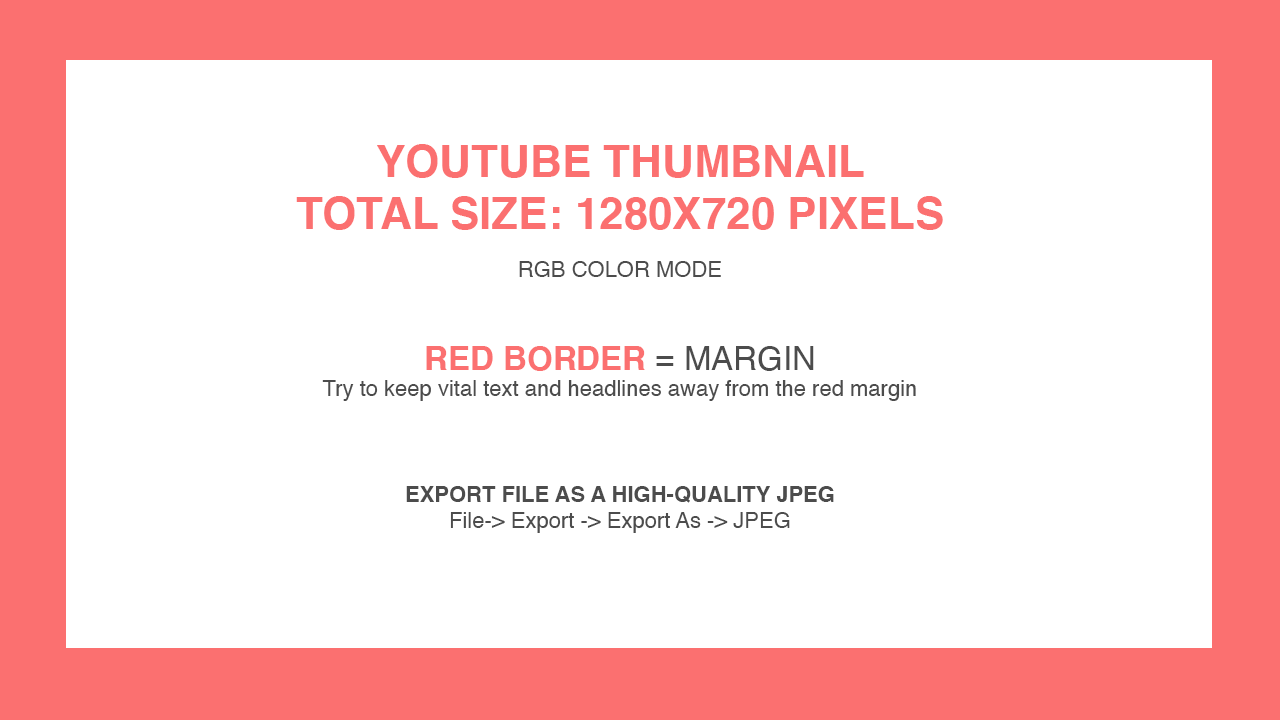
<style>
.page{position:relative;width:1280px;height:720px;background:#ffffff}
.page>*{position:absolute;margin:0}
.t1{font:22px "Helvetica";color:#4c4c4c}
.t2{font:44px "Helvetica-Bold";color:#fb7070;text-transform:uppercase}
.t3{font:22px/48px "Helvetica";color:#4c4c4c}
.t4{font:33px "Helvetica-Bold";color:#fb7070;text-transform:uppercase}
.t5{font:33px "Helvetica";color:#4c4c4c;text-transform:uppercase}
.t6{font:22px "Helvetica-Bold";color:#4c4c4c;text-transform:uppercase}
</style>
<div class="page">
<p class="t1" style="left:296px;top:144px;width:647px;height:389px;text-align:center"><span class="t2"><br>YOUTUBE THUMBNAIL<br>TOtal size: 1280x720 Pixels<br></span><span class="t3">RGB COLOR MODE<br><br></span><span class="t4">RED BORDER</span><span class="t5"> = MARGIN<br></span>Try to keep vital text and headlines away from the red margin<br><br><br><br><span class="t6">Export file as a high-quality JPEG<br></span>File-&gt; Export -&gt; Export As -&gt; JPEG</p>
</div>
